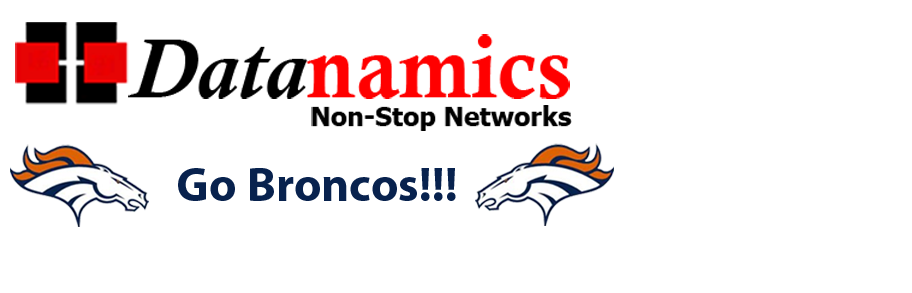
<style>
.page{position:relative;width:912px;height:293px;background:#ffffff}
.page>*{position:absolute;margin:0}
.t1{font:86.5px "CalisMTBol";color:#ff0000}
.t2{font:86.5px "CalistoMT-BoldItalic";color:#000000}
.t3{font:26.4px "Tahoma-Bold";color:#000000}
.t4{font:48px "MyriadPro-Bold";color:#08224e}
</style>
<div class="page">
<p class="t1" style="left:128px;top:34px;width:442px;height:65px"><span class="t2">Data</span>namics</p>
<p class="t3" style="left:311px;top:105px;width:261px;height:26px">Non-Stop Networks</p>
<p class="t4" style="left:178px;top:168px;width:278px;height:33px">Go Broncos!!!</p>
</div>
